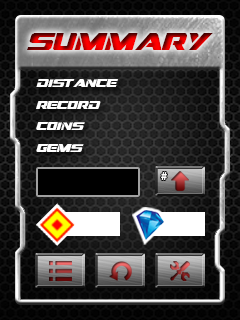
<style>
.page{position:relative;width:240px;height:320px}
.page>*{position:absolute;margin:0}
.t1{font:24px "DreamMMA"}
.t2{font:11px "DreamMMA";color:#ffffff}
.t3{font:12px "MyriadPro-Bold";color:#ffffff}
</style>
<div class="page">
<p class="t1" style="left:27px;top:33px;width:186px;height:17px">summary</p>
<p class="t2" style="left:36px;top:79px;width:82px;height:8px">distance</p>
<p class="t2" style="left:36px;top:101px;width:65px;height:8px">record</p>
<p class="t2" style="left:36px;top:122px;width:49px;height:8px">coins</p>
<p class="t2" style="left:36px;top:144px;width:48px;height:8px">gems</p>
<p class="t3" style="left:161px;top:172px;width:6px;height:8px">#</p>
</div>
